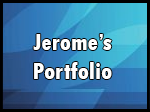
<style>
.page{position:relative;width:150px;height:112px}
.page>*{position:absolute;margin:0}
.t1{font:24px "TwCenMT-CondensedExtraBold";color:#ffffff}
</style>
<div class="page">
<p class="t1" style="left:33px;top:34px;width:79px;height:45px">Jerome’s <br>Portfolio</p>
</div>
